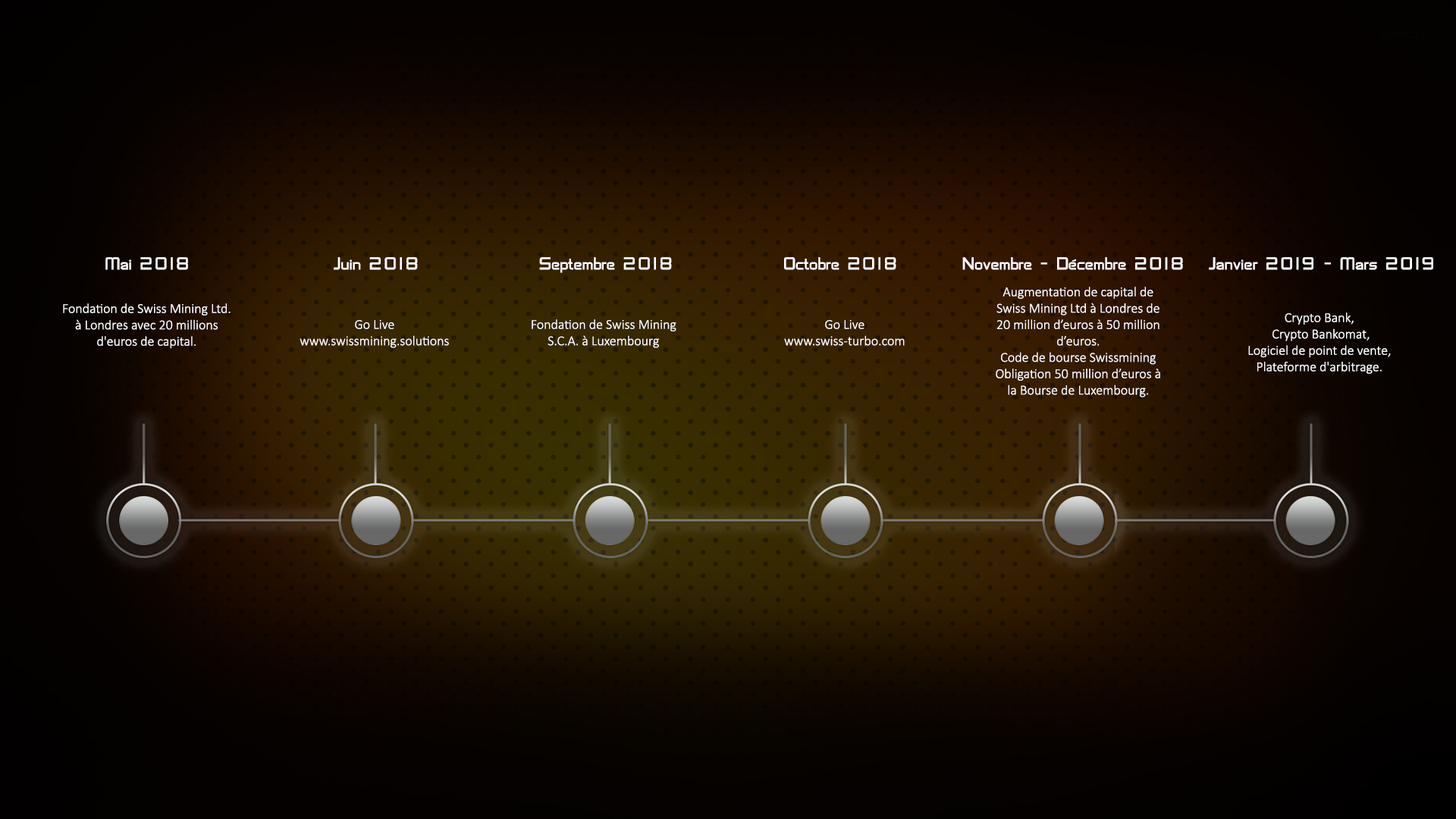
<style>
.page{position:relative;width:1456px;height:819px}
.page>*{position:absolute;margin:0}
.t1{font:18.2px "SFChaerilidae";color:#ffffff}
.t2{font:13.6px "Calibri-Light";color:#ffffff}
</style>
<div class="page">
<p class="t1" style="left:105px;top:257px;width:83px;height:13px">Mai 2018</p>
<p class="t1" style="left:334px;top:257px;width:84px;height:13px">Juin 2018</p>
<p class="t1" style="left:539px;top:257px;width:133px;height:16px">Septembre 2018</p>
<p class="t1" style="left:784px;top:257px;width:112px;height:13px">Octobre 2018</p>
<p class="t1" style="left:962px;top:257px;width:221px;height:13px">Novembre - Décembre 2018</p>
<p class="t1" style="left:1209px;top:257px;width:224px;height:13px">Janvier 2019 - Mars 2019</p>
<p class="t2" style="left:996px;top:287px;width:164px;height:110px;text-align:center">Augmentation de capital de Swiss Mining Ltd à Londres de 20 million d’euros à 50 million d’euros. <br>Code de bourse Swissmining Obligation 50 million d’euros à la Bourse de Luxembourg.</p>
<p class="t2" style="left:63px;top:303px;width:168px;height:46px;text-align:center">Fondation de Swiss Mining Ltd. à Londres avec 20 millions d'euros de capital.</p>
<p class="t2" style="left:1248px;top:312px;width:143px;height:62px;text-align:center">Crypto Bank,<br> Crypto Bankomat, <br>Logiciel de point de vente, Plateforme d'arbitrage.</p>
<p class="t2" style="left:300px;top:320px;width:149px;height:28px;text-align:center">Go Live <br>www.swissmining.solutions</p>
<p class="t2" style="left:532px;top:319px;width:144px;height:29px;text-align:center">Fondation de Swiss Mining S.C.A. à Luxembourg</p>
<p class="t2" style="left:784px;top:320px;width:121px;height:26px;text-align:center">Go Live <br>www.swiss-turbo.com</p>
</div>
